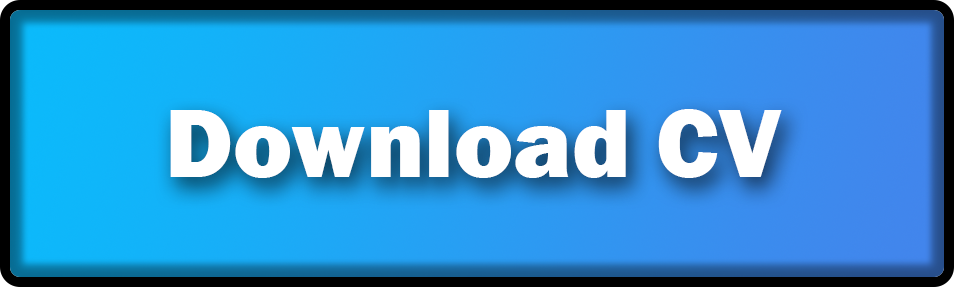
<style>
.page{position:relative;width:954px;height:287px}
.page>*{position:absolute;margin:0}
.t1{font:100px "FranklinGothic-Heavy";color:#ffffff}
</style>
<div class="page">
<p class="t1" style="left:170px;top:109px;width:612px;height:69px">Download CV</p>
</div>
